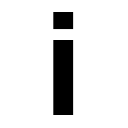
<style>
.page{position:relative;width:128px;height:128px;background:#ffffff}
.page>*{position:absolute;margin:0}
.t1{font:144px "Arial-BoldMT";color:#000000}
</style>
<div class="page">
<p class="t1" style="left:53px;top:12px;width:21px;height:103px">i</p>
</div>
